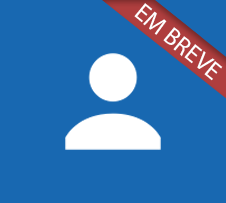
<style>
.page{position:relative;width:226px;height:203px;background:#1868b1}
.page>*{position:absolute;margin:0}
.t1{font:25px "MyriadPro-Regular";color:#ffffff}
</style>
<div class="page">
<p class="t1" style="left:134px;top:3px;width:89px;height:78px;rotate:39deg">EM BREVE</p>
</div>
